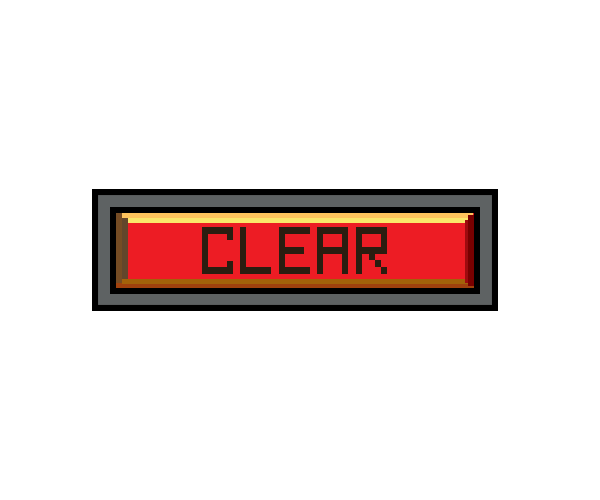
<style>
.page{position:relative;width:600px;height:500px;background:#ffffff}
.page>*{position:absolute;margin:0}
.t1{font:90px "14272BluemoonPixCersv.1.1";color:#2b1d10}
</style>
<div class="page">
<p class="t1" style="left:202px;top:227px;width:185px;height:47px">CLEAR</p>
</div>
